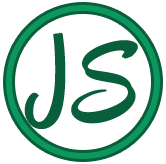
<style>
.page{position:relative;width:166px;height:164px;background:#ffffff}
.page>*{position:absolute;margin:0}
.t1{font:116px "Oregano-Regular";color:#095e3b}
</style>
<div class="page">
<p class="t1" style="left:24px;top:32px;width:114px;height:97px">JS</p>
</div>
